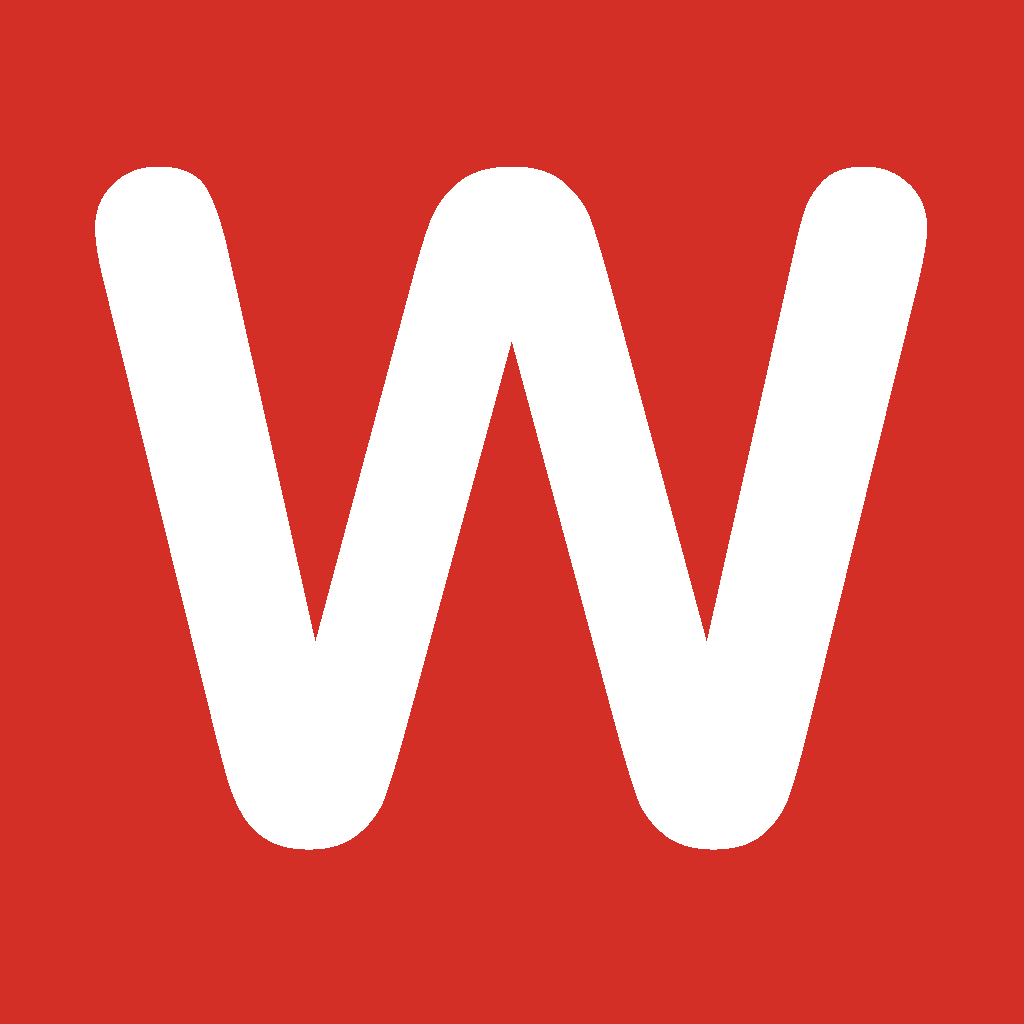
<style>
.page{position:relative;width:1024px;height:1024px;background:#d32f27}
.page>*{position:absolute;margin:0}
.t1{font:920.8px "ArialRoundedMTBold";color:#ffffff}
</style>
<div class="page">
<p class="t1" style="left:95px;top:167px;width:832px;height:683px">W</p>
</div>
